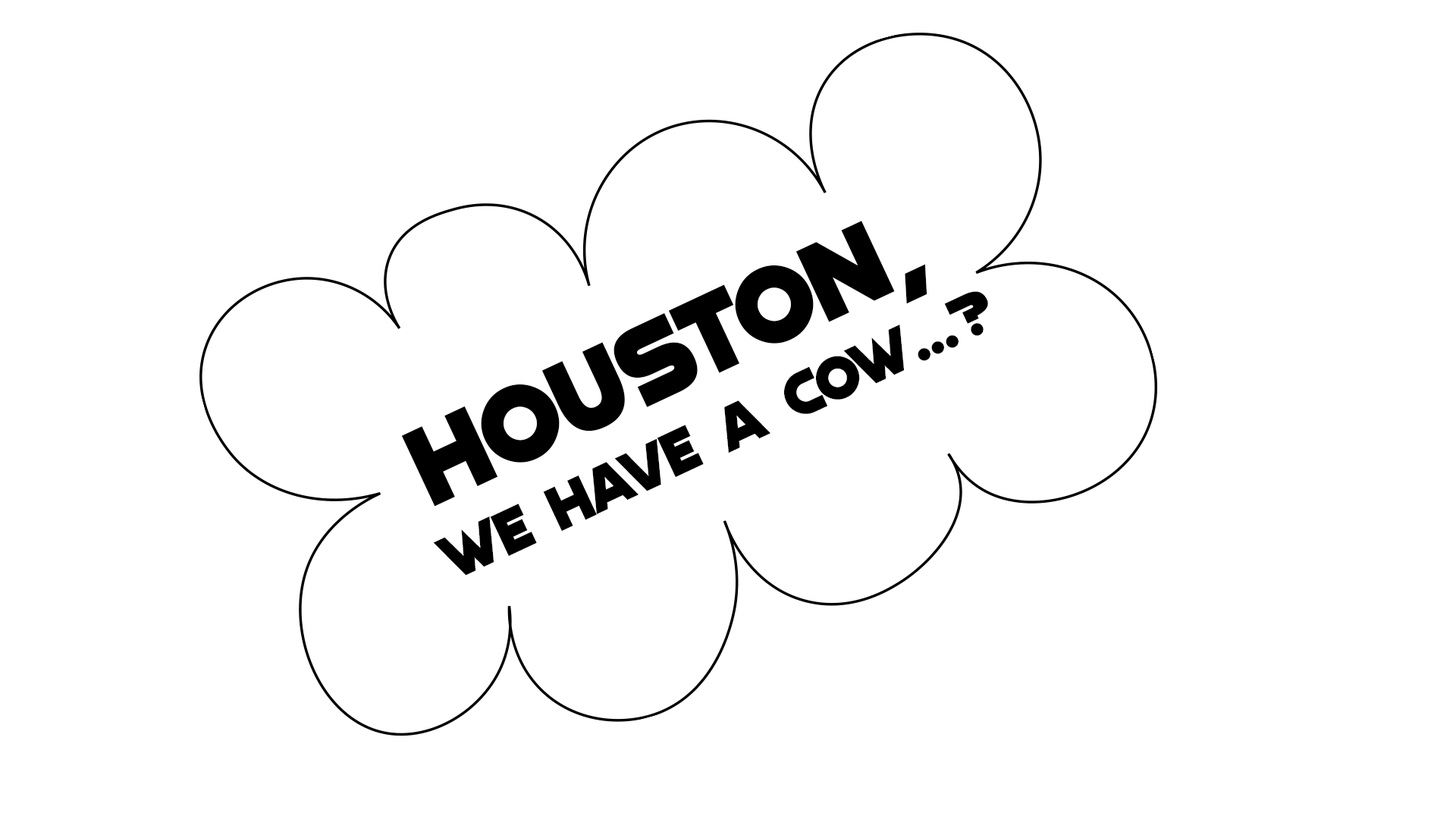
<style>
.page{position:relative;width:1456px;height:819px;background:#ffffff}
.page>*{position:absolute;margin:0}
.t1{font:63.2px "Quicksilver";color:#000000}
.t2{font:113.7px "Quicksilver";color:#000000}
</style>
<div class="page">
<p class="t1" style="left:401px;top:221px;width:587px;height:355px;text-align:center;rotate:-25deg"><span class="t2">Houston,</span> <br>We Have a Cow...?</p>
</div>
